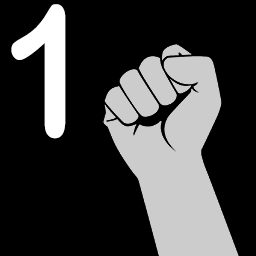
<style>
.page{position:relative;width:256px;height:256px;background:#000000}
.page>*{position:absolute;margin:0}
.t1{font:182.4px "ArialRoundedMTBold";letter-spacing:-0.4em;color:#ffffff;font-variant:small-caps;scale:0.83 1}
</style>
<div class="page">
<p class="t1" style="left:11px;top:4px;width:55px;height:135px">1</p>
</div>
